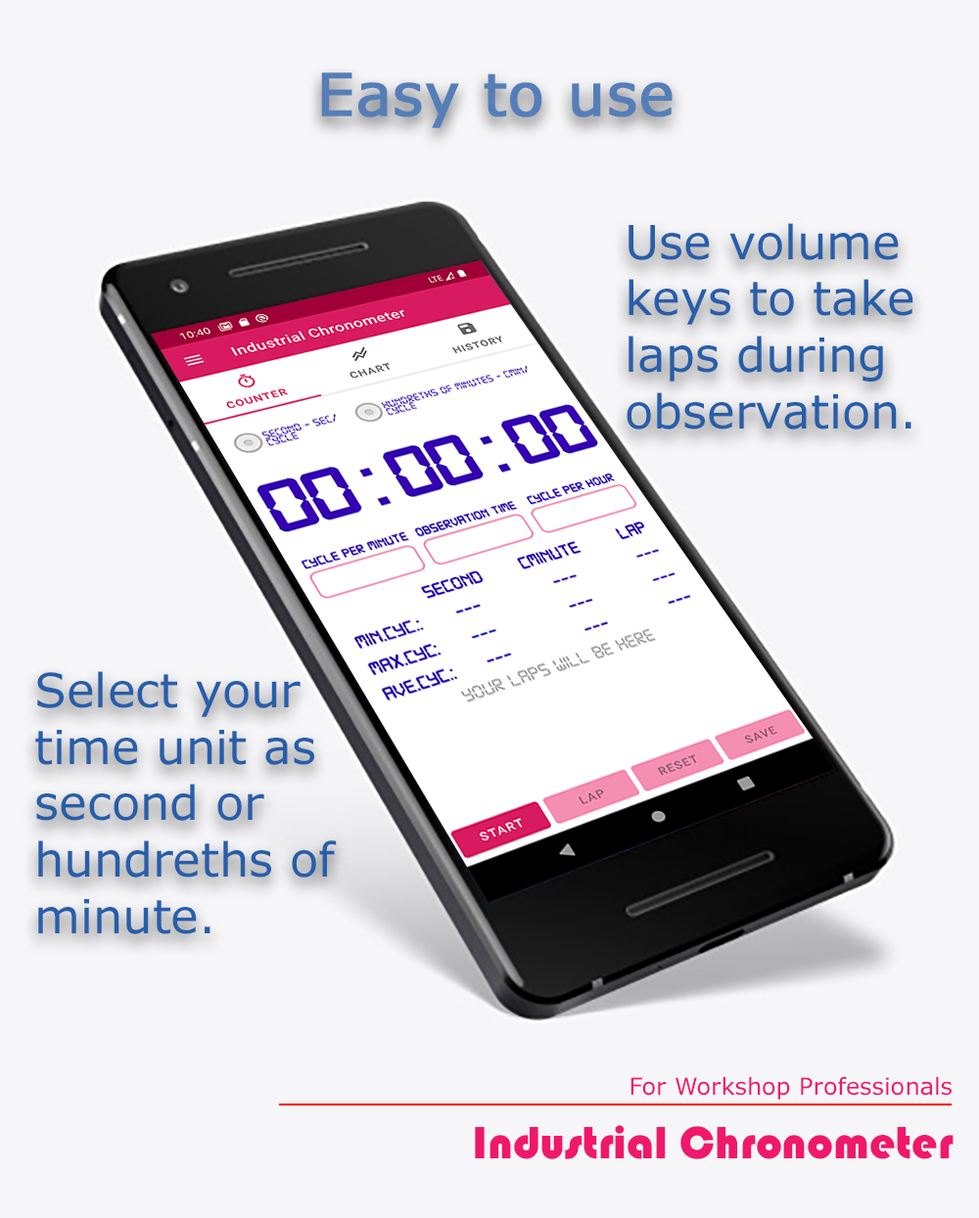
<style>
.page{position:relative;width:979px;height:1218px;background:#f6f6f8}
.page>*{position:absolute;margin:0}
.t1{font:58.7px "MSReferenceSansSerif";color:#557eb8;font-weight:bold}
.t2{font:47px "MSReferenceSansSerif";color:#275eaa}
.t3{font:23.5px "MSReferenceSansSerif";color:#f0186a}
.t4{font:47px "Bauhaus93";color:#f0186a}
</style>
<div class="page">
<p class="t1" style="left:321px;top:72px;width:351px;height:56px">Easy to use</p>
<p class="t2" style="left:626px;top:223px;width:287px;height:207px">Use volume keys to take laps during observation.</p>
<p class="t2" style="left:35px;top:671px;width:302px;height:264px">Select your time unit as second or hundreths of minute.</p>
<p class="t3" style="left:630px;top:1077px;width:321px;height:23px">For Workshop Professionals</p>
<p class="t4" style="left:475px;top:1125px;width:478px;height:35px">Industrial Chronometer</p>
</div>
